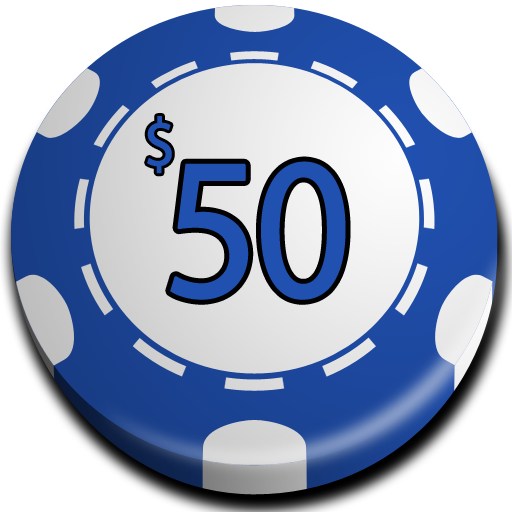
<style>
.page{position:relative;width:512px;height:512px;background:#ffffff}
.page>*{position:absolute;margin:0}
.t1{font:117.9px "MyriadPro-Regular";letter-spacing:-0.05em;color:#2050b0;font-variant:small-caps;font-weight:bold;scale:0.92 1}
.t2{font:346.9px "MyriadPro-Regular";letter-spacing:-0.05em;color:#2050b0;font-variant:small-caps;font-weight:bold;scale:0.92 1}
</style>
<div class="page">
<p class="t1" style="left:147px;top:116px;width:25px;height:58px">$</p>
<p class="t2" style="left:170px;top:161px;width:176px;height:139px">50</p>
</div>
